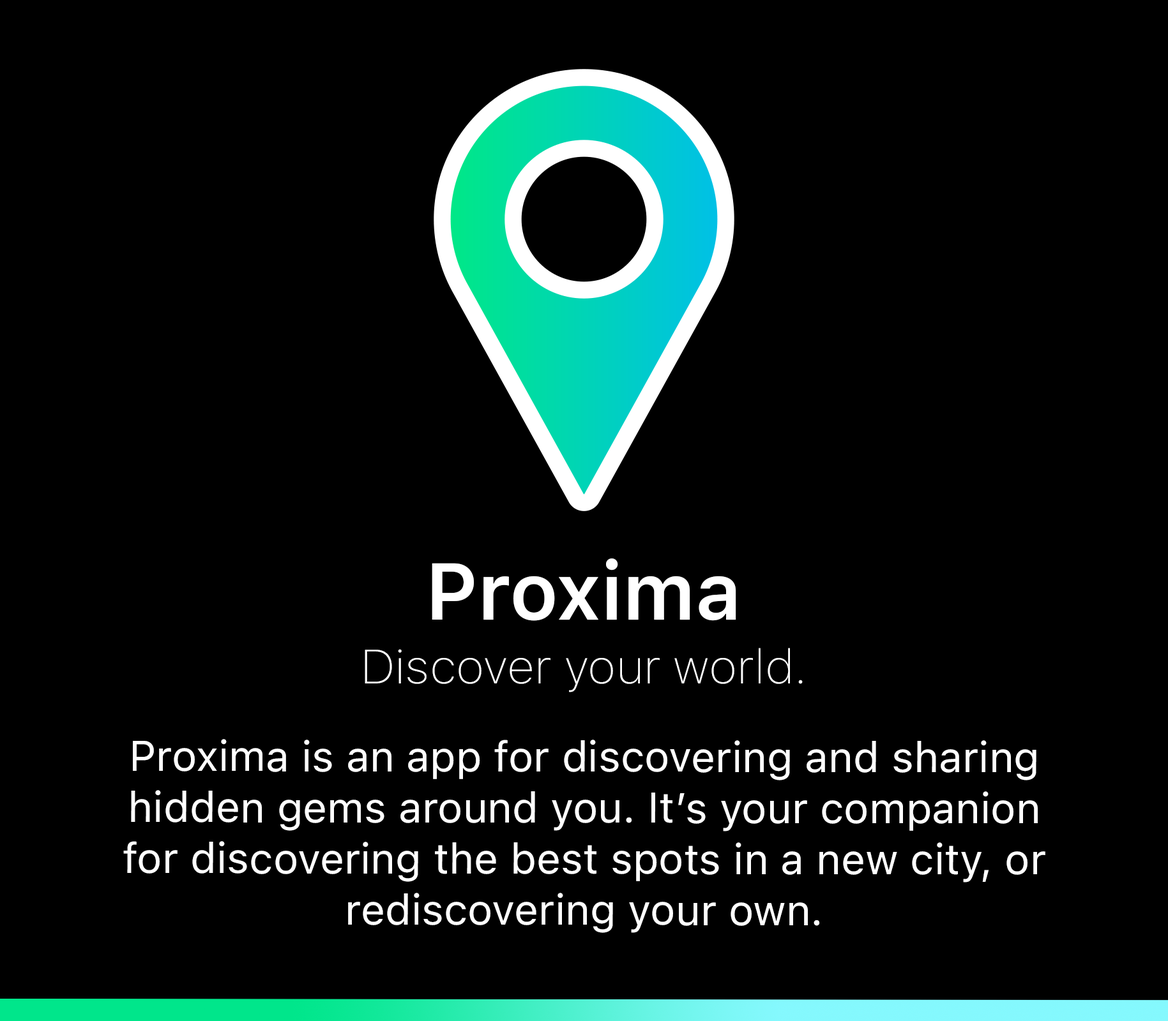
<style>
.page{position:relative;width:1168px;height:1021px;background:#000000}
.page>*{position:absolute;margin:0}
.t1{font:79.8px "SFProText-Semibold";color:#ffffff}
.t2{font:47.9px "SFProText-Thin";color:#ffffff}
.t3{font:42.6px "SFProText-Regular";color:#ffffff}
</style>
<div class="page">
<p class="t1" style="left:432px;top:559px;width:304px;height:62px">Proxima</p>
<p class="t2" style="left:364px;top:648px;width:438px;height:45px">Discover your world.</p>
<p class="t3" style="left:123px;top:739px;width:922px;height:194px;text-align:center">Proxima is an app for discovering and sharing<br>hidden gems around you. It’s your companion<br>for discovering the best spots in a new city, or<br>rediscovering your own.</p>
</div>
